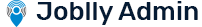
<style>
.page{position:relative;width:202px;height:27px;background:#ffffff}
.page>*{position:absolute;margin:0}
.t1{font:26.3px "Rubik-Medium";color:#051b34}
</style>
<div class="page">
<p class="t1" style="left:36px;top:1px;width:162px;height:24px">Joblly Admin</p>
</div>
